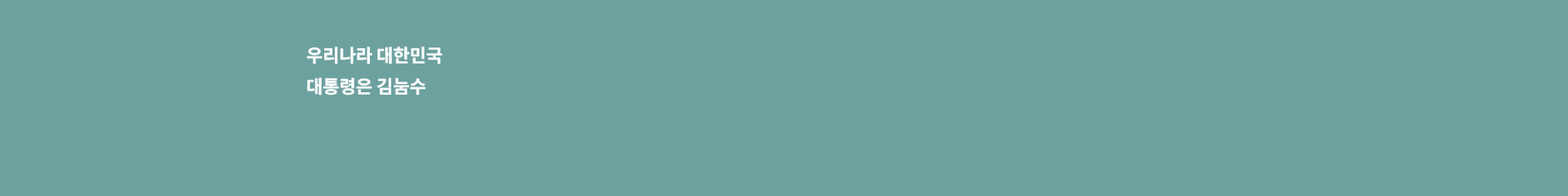
<style>
.page{position:relative;width:1568px;height:196px;background:#6da19f}
.page>*{position:absolute;margin:0}
.t1{font:18px "NotoSansKR-Bold";color:#f8fcfc;text-transform:uppercase}
</style>
<div class="page">
<p class="t1" style="left:306px;top:47px;width:137px;height:49px">우리나라 대한민국<br>대통령은 김눔수</p>
</div>
